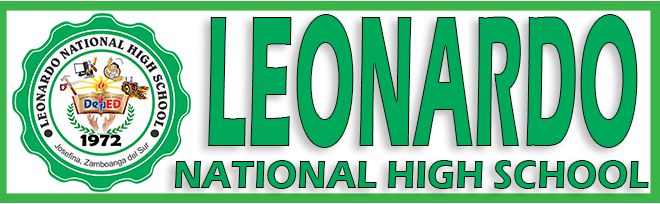
<style>
.page{position:relative;width:660px;height:204px;background:#00a859}
.page>*{position:absolute;margin:0}
.t1{font:194.5px "ErasITC-Bold";color:#00a859;scale:0.37 1}
.t2{font:41.1px "ErasITC-Bold";scale:0.87 1}
</style>
<div class="page">
<p class="t1" style="left:208px;top:14px;width:430px;height:134px">LEONARDO</p>
<p class="t2" style="left:174px;top:160px;width:475px;height:29px">NATIONAL HIGH SCHOOL</p>
</div>
